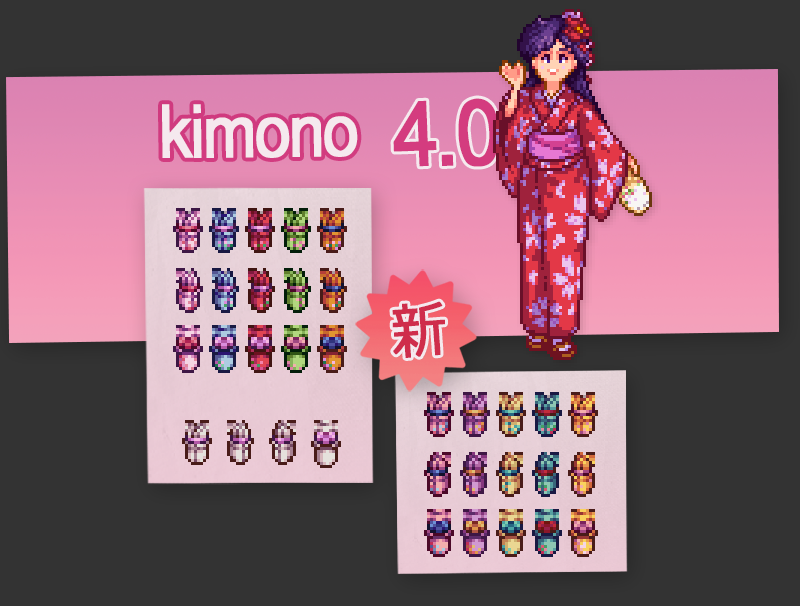
<style>
.page{position:relative;width:800px;height:606px;background:#333333}
.page>*{position:absolute;margin:0}
.t1{font:90px "Helvetica-Normal";letter-spacing:-0.05em;color:#d43c7f;font-weight:bold;scale:0.9 1}
.t2{font:72px "Helvetica-Normal";letter-spacing:-0.06em;color:#f5e9ee;font-weight:bold;scale:0.9 1}
.t3{font:60px "Meiryo";letter-spacing:-0.05em;color:#cf2d4b;font-weight:bold;scale:0.9 1}
</style>
<div class="page">
<p class="t1" style="left:393px;top:98px;width:106px;height:69px;rotate:-2deg">4.0</p>
<p class="t2" style="left:162px;top:104px;width:196px;height:54px;rotate:-1deg">kimono</p>
<p class="t3" style="left:392px;top:301px;width:53px;height:57px;rotate:-4deg">新</p>
</div>
